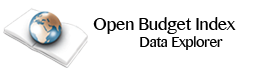
<style>
.page{position:relative;width:261px;height:74px;background:#ffffff}
.page>*{position:absolute;margin:0}
.t1{font:20.3px "KhmerMN";letter-spacing:-0.02em;color:#000000;scale:0.95 1}
.t2{font:20.3px "KhmerMN";letter-spacing:-0.04em;color:#000000;scale:0.95 1}
.t3{font:16.8px "KhmerMN";letter-spacing:-0.02em;color:#000000;scale:0.95 1}
</style>
<div class="page">
<p class="t1" style="left:93px;top:17px;width:143px;height:17px">Open Bud<span class="t2">g</span>et Index</p>
<p class="t3" style="left:140px;top:36px;width:83px;height:14px">Data Explorer</p>
</div>
